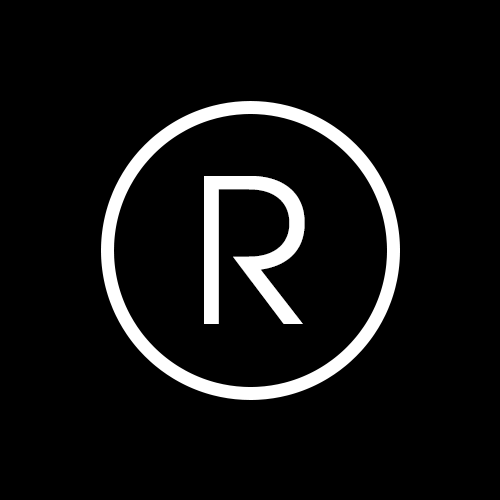
<style>
.page{position:relative;width:500px;height:500px;background:#000000}
.page>*{position:absolute;margin:0}
.t1{font:200px "AvantGarde-Book";color:#ffffff}
</style>
<div class="page">
<p class="t1" style="left:204px;top:176px;width:101px;height:148px">R</p>
</div>
